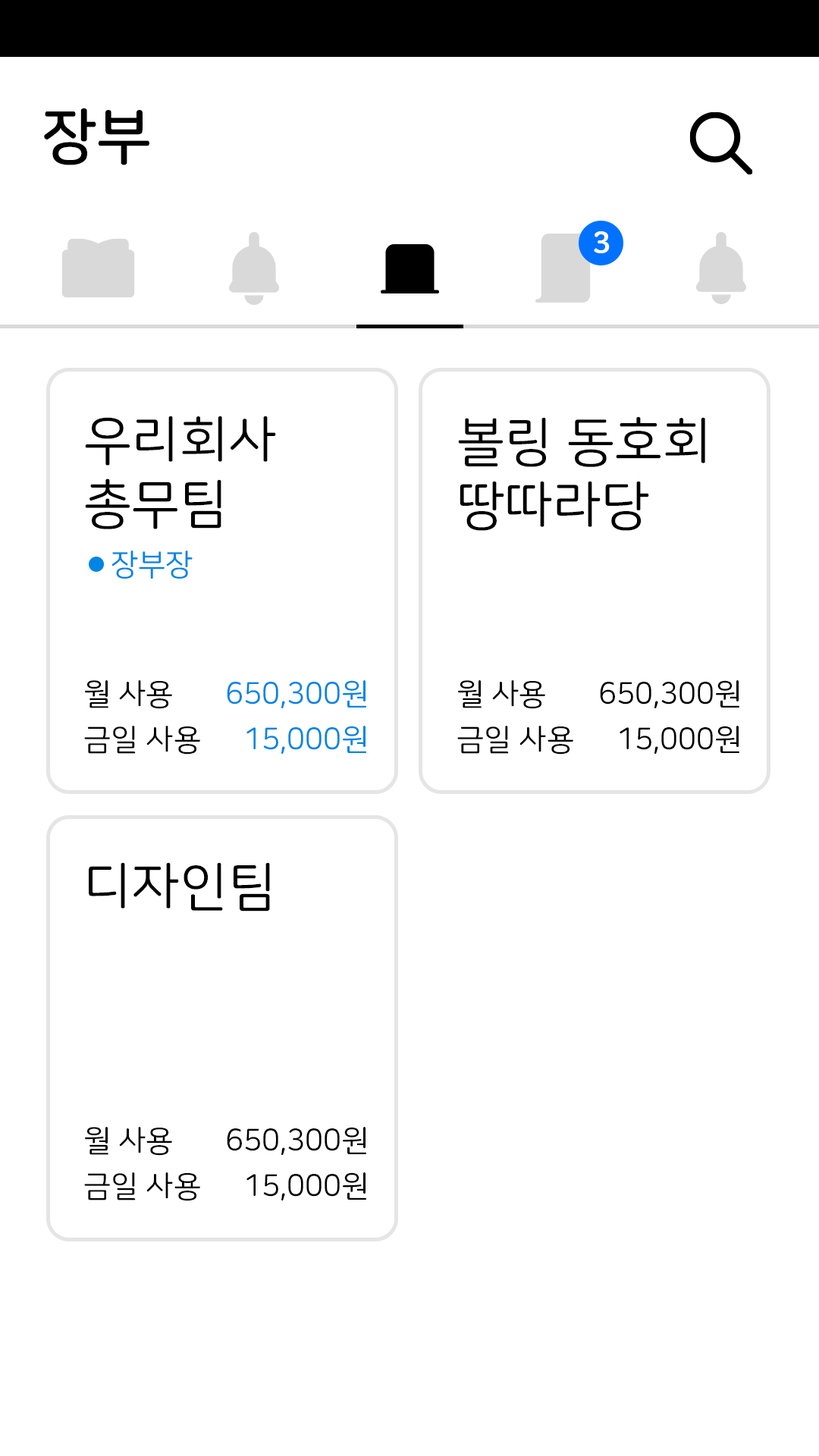
<style>
.page{position:relative;width:819px;height:1456px;background:#ffffff}
.page>*{position:absolute;margin:0}
.t1{font:60.7px "NanumSquareRoundB";color:#010101}
.t2{font:30.3px "NanumSquareRoundEB";color:#ffffff}
.t3{font:53.1px "NanumSquareRoundR";color:#000000;text-transform:uppercase}
.t4{font:30.3px "NanumSquareRoundR";color:#0085e4;text-transform:uppercase}
.t5{font:30.3px/45.5px "NanumSquareRoundR";color:#000000;text-transform:uppercase}
.t6{font:30.3px/45.5px "NanumSquareRoundR";color:#0085e4;text-transform:uppercase}
</style>
<div class="page">
<p class="t1" style="left:44px;top:108px;width:105px;height:57px">장부</p>
<p class="t2" style="left:594px;top:231px;width:16px;height:22px">3</p>
<p class="t3" style="left:85px;top:416px;width:191px;height:113px">우리회사<br>총무팀</p>
<p class="t3" style="left:458px;top:416px;width:247px;height:115px">볼링 동호회<br>땅따라당</p>
<p class="t4" style="left:111px;top:551px;width:82px;height:28px">장부장</p>
<p class="t5" style="left:84px;top:680px;width:116px;height:75px">월 사용<br>금일 사용</p>
<p class="t6" style="left:227px;top:680px;width:139px;height:74px;text-align:right">650,300원<br>15,000원</p>
<p class="t5" style="left:457px;top:680px;width:116px;height:75px">월 사용<br>금일 사용</p>
<p class="t5" style="left:600px;top:680px;width:139px;height:74px;text-align:right">650,300원<br>15,000원</p>
<p class="t3" style="left:89px;top:862px;width:181px;height:50px">디자인팀</p>
<p class="t5" style="left:84px;top:1127px;width:116px;height:74px">월 사용<br>금일 사용</p>
<p class="t5" style="left:227px;top:1127px;width:139px;height:73px;text-align:right">650,300원<br>15,000원</p>
</div>
